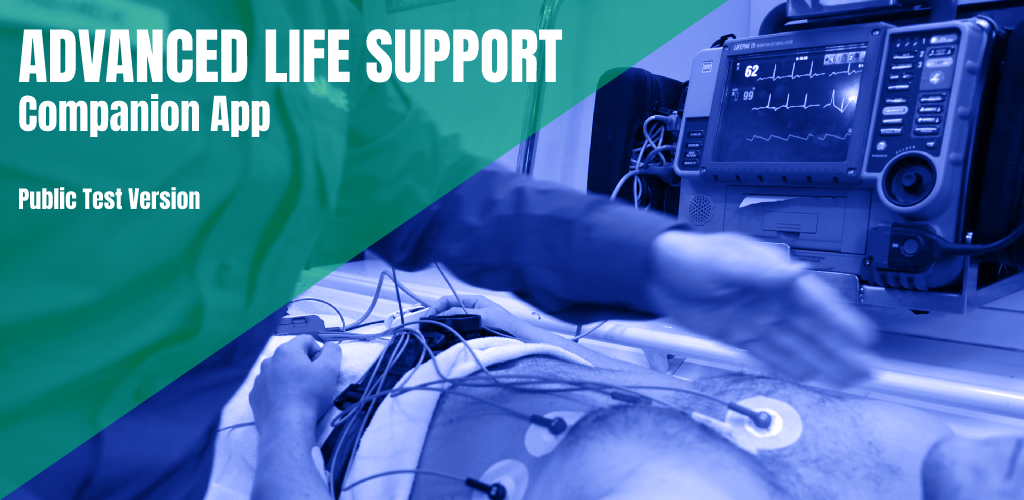
<style>
.page{position:relative;width:1024px;height:500px}
.page>*{position:absolute;margin:0}
.t1{font:61px "Anton-Regular";color:#ffffff}
.t2{font:41px "Anton-Regular";color:#ffffff}
.t3{font:24px "Anton-Regular";color:#ffffff}
</style>
<div class="page">
<p class="t1" style="left:18px;top:29px;width:545px;height:181px">ADVANCED LIFE SUPPORT<br><span class="t2">Companion App<br><br></span><span class="t3">Public Test Version</span></p>
</div>
